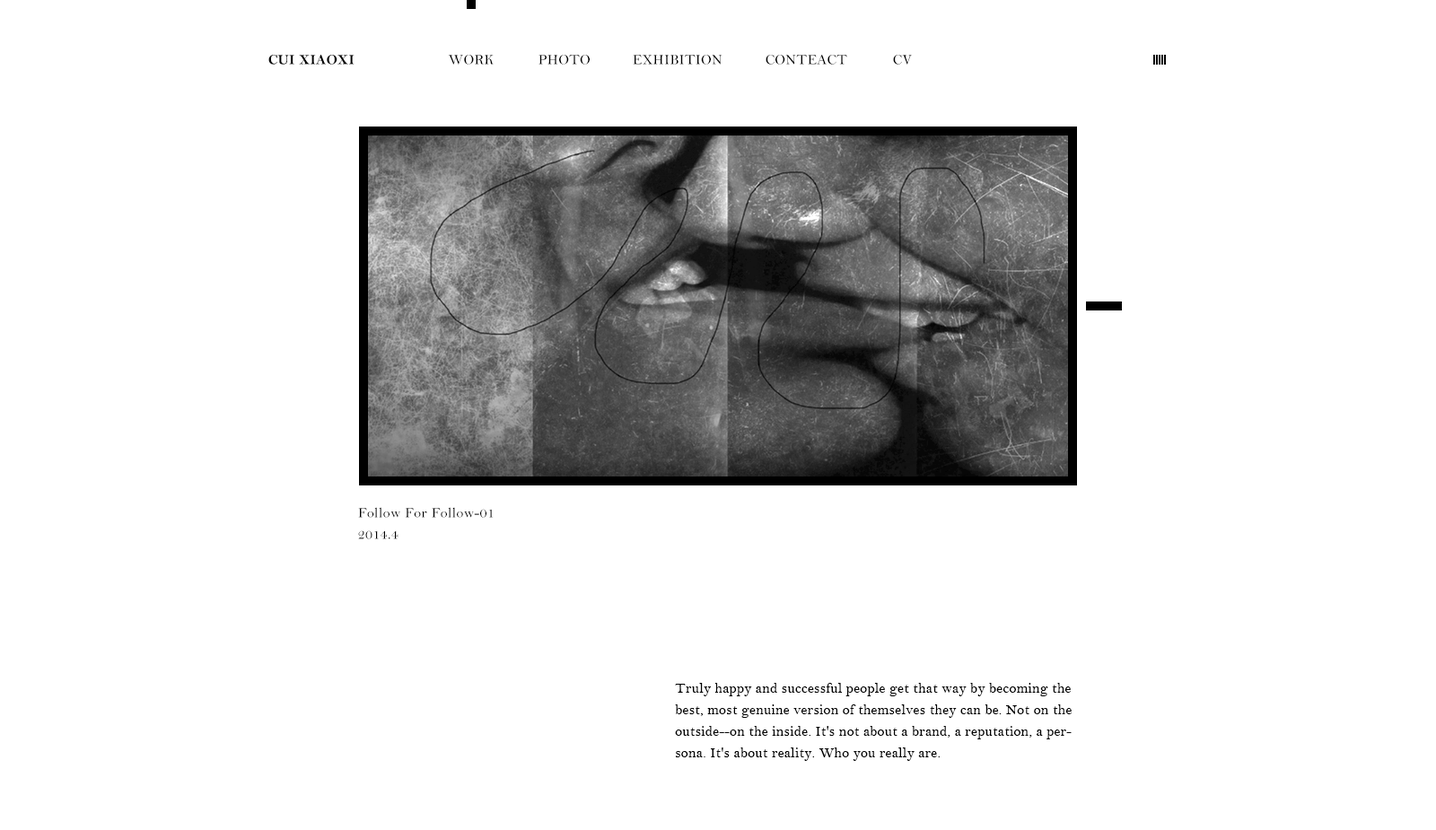
<style>
.page{position:relative;width:1436px;height:830px;background:#ffffff}
.page>*{position:absolute;margin:0}
.t1{font:14.4px "BellMTBold";letter-spacing:0.02em;color:#000000;text-transform:uppercase}
.t2{font:14.4px "BellMT";letter-spacing:0.02em;color:#000000;text-transform:uppercase}
.t3{font:14.4px/21.5px "BellMT";letter-spacing:0.02em;color:#000000}
</style>
<div class="page">
<p class="t1" style="left:268px;top:55px;width:87px;height:10px">cui xiaoxi</p>
<p class="t2" style="left:448px;top:55px;width:46px;height:10px">work</p>
<p class="t2" style="left:539px;top:55px;width:51px;height:10px">photo</p>
<p class="t2" style="left:633px;top:55px;width:90px;height:10px">exhibition</p>
<p class="t2" style="left:766px;top:55px;width:81px;height:10px">conteact</p>
<p class="t2" style="left:893px;top:55px;width:19px;height:10px">cv</p>
<p class="t3" style="left:358px;top:507px;width:136px;height:32px">Follow For Follow-01<br>2014.4</p>
<p class="t3" style="left:675px;top:683px;width:397px;height:78px">Truly happy and successful people get that way by becoming the best, most genuine version of themselves they can be. Not on the outside--on the inside. It's not about a brand, a reputation, a persona. It's about reality. Who you really are.</p>
</div>
